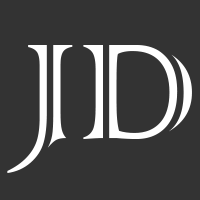
<style>
.page{position:relative;width:200px;height:200px;background:#333333}
.page>*{position:absolute;margin:0}
.t1{font:179.7px "ColonnaMT";color:#ffffff}
</style>
<div class="page">
<p class="t1" style="left:7px;top:45px;width:185px;height:128px">JD</p>
</div>
